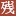
<style>
.page{position:relative;width:16px;height:16px;background:#a74430}
.page>*{position:absolute;margin:0}
.t1{font:14px "KozMinPr6N-Regular";color:#fffefe}
</style>
<div class="page">
<p class="t1" style="left:1px;top:0px;width:14px;height:14px">残</p>
</div>
